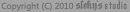
<style>
.page{position:relative;width:130px;height:12px;background:#a5a5a5}
.page>*{position:absolute;margin:0}
.t1{font:8px "MicrosoftYaHei";color:#707070}
.t2{font:10px "PlainGermanica";color:#707070}
.t3{font:12px "GothamNightsNormal";color:#707070}
</style>
<div class="page">
<p class="t1" style="left:1px;top:0px;width:126px;height:11px">Copyright (C) 2010 <span class="t2">sleky's </span><span class="t3">studio</span></p>
</div>
